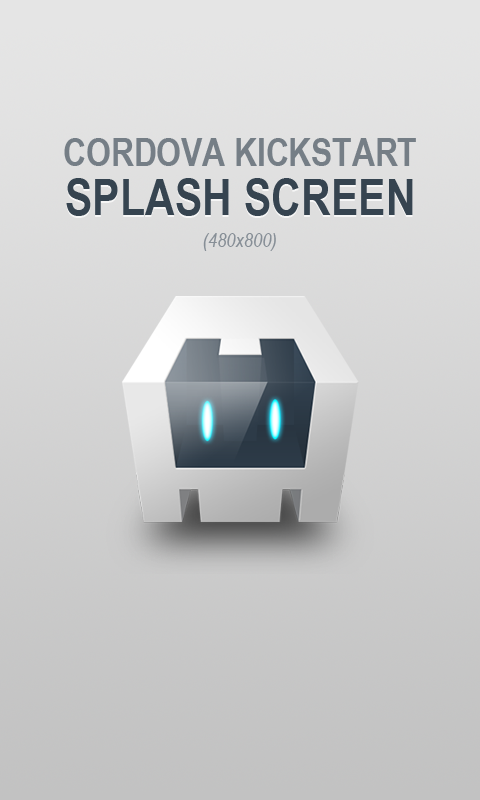
<style>
.page{position:relative;width:480px;height:800px}
.page>*{position:absolute;margin:0}
.t1{font:38.6px "ArialNarrow-Bold";color:#757e86;text-transform:uppercase}
.t2{font:50.3px "ArialNarrow-Bold";color:#364450;text-transform:uppercase}
.t3{font:20.1px "ArialNarrow-Italic";color:#868e96}
</style>
<div class="page">
<p class="t1" style="left:64px;top:138px;width:352px;height:28px">Cordova Kickstart</p>
<p class="t2" style="left:66px;top:178px;width:347px;height:38px">Splash Screen</p>
<p class="t3" style="left:203px;top:233px;width:73px;height:18px">(480x800)</p>
</div>
